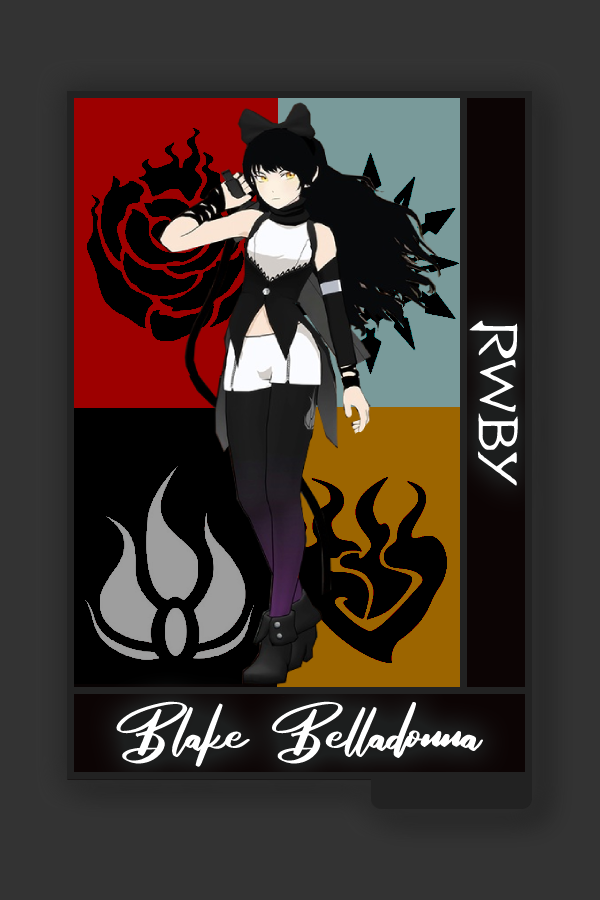
<style>
.page{position:relative;width:600px;height:900px;background:#333333}
.page>*{position:absolute;margin:0}
.t1{font:61.3px "RWBY_Style";color:#ffffff;scale:1.25 1}
.t2{font:75px "RosegaFREE";color:#ffffff}
</style>
<div class="page">
<p class="t1" style="left:469px;top:320px;width:49px;height:166px;rotate:90deg">RWBY</p>
<p class="t2" style="left:115px;top:701px;width:369px;height:66px">Blake Belladonna</p>
</div>
